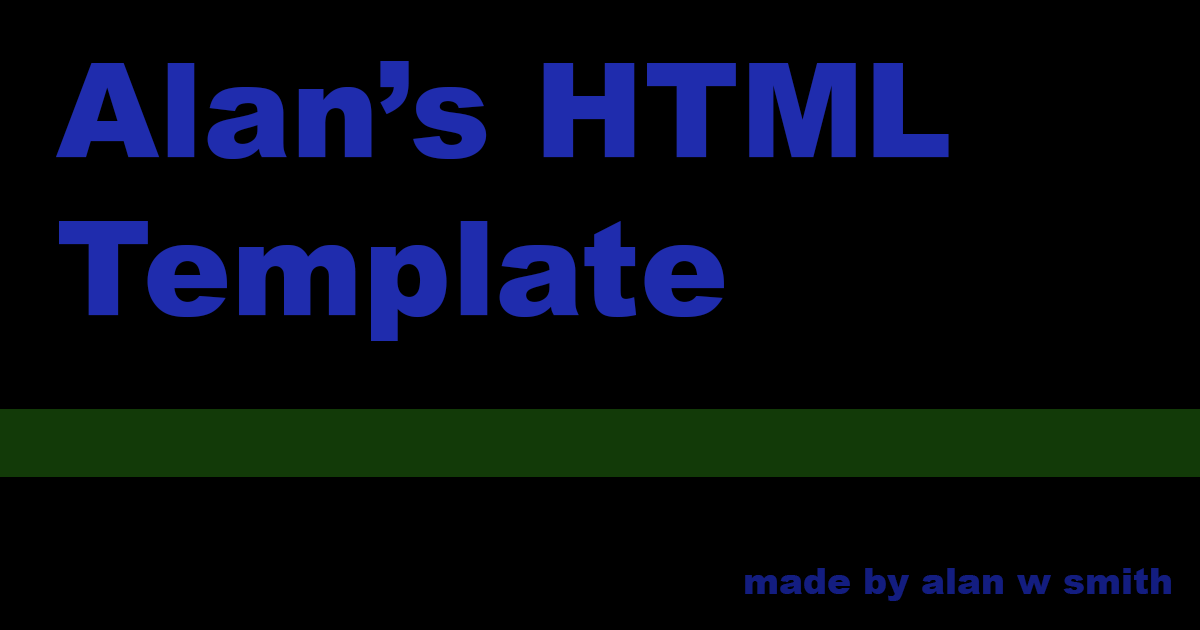
<style>
.page{position:relative;width:1200px;height:630px;background:#000000}
.page>*{position:absolute;margin:0}
.t1{font:132px "Arial-Black";color:#1f2cad}
.t2{font:36px "Arial-Black";color:#131d80}
</style>
<div class="page">
<p class="t1" style="left:56px;top:61px;width:893px;height:280px">Alan’s HTML<br>Template</p>
<p class="t2" style="left:745px;top:568px;width:426px;height:33px">made by alan w smith</p>
</div>
